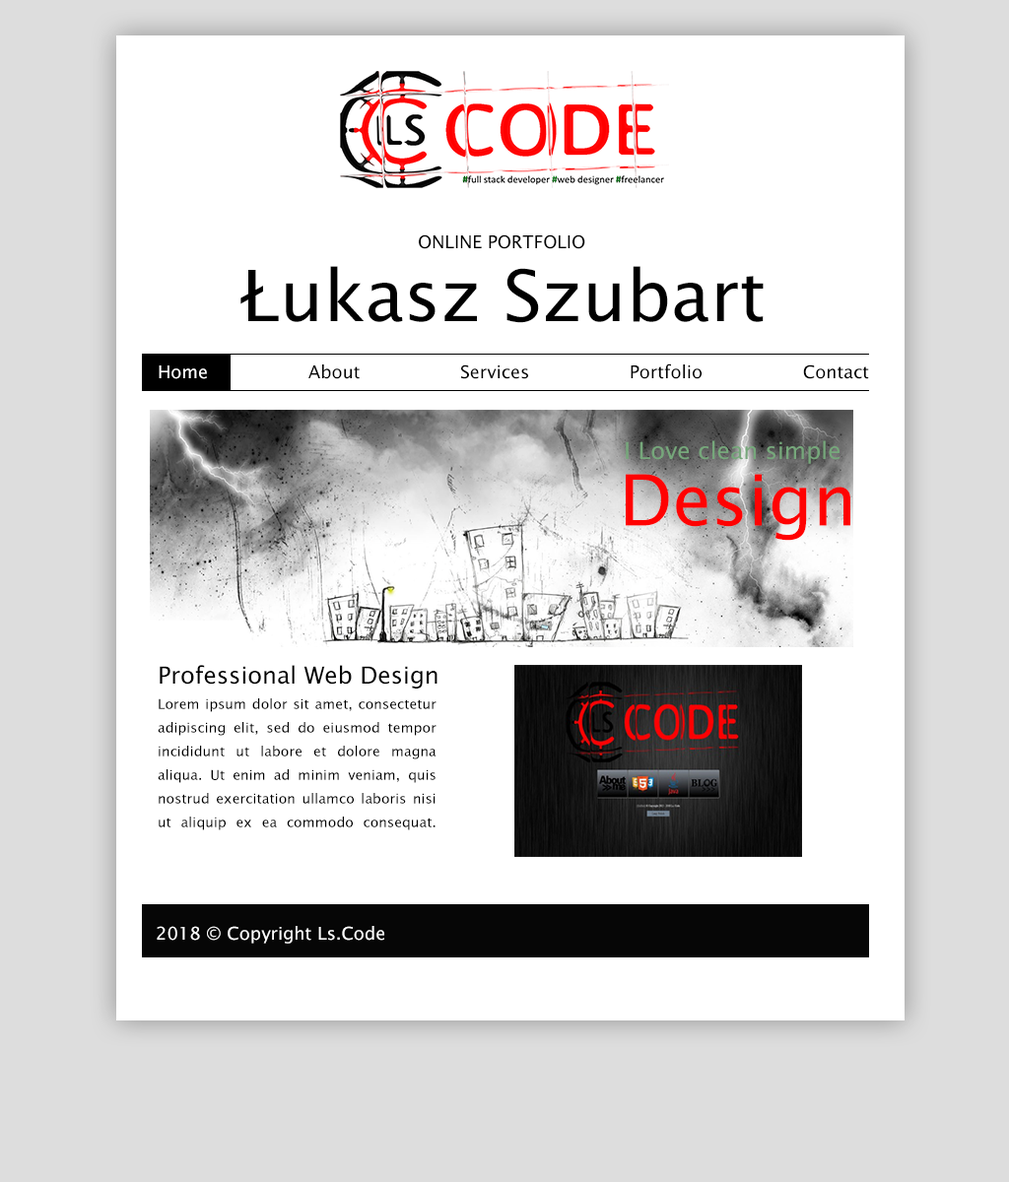
<style>
.page{position:relative;width:1009px;height:1182px;background:#ffffff}
.page>*{position:absolute;margin:0}
.t1{font:17.7px "LucidaSansUnicode";color:#000000}
.t2{font:70.9px "LucidaSansUnicode";color:#000000}
.t3{font:17.7px "LucidaSansUnicode";color:#ffffff}
.t4{font:23.6px "LucidaSansUnicode";color:#76a77b}
.t5{font:70.9px "LucidaSansUnicode";color:#ff0202}
.t6{font:23.6px "LucidaSansUnicode";color:#000000}
.t7{font:13.8px/23.6px "LucidaSansUnicode";color:#000000}
</style>
<div class="page">
<p class="t1" style="left:419px;top:234px;width:166px;height:15px">ONLINE PORTFOLIO</p>
<p class="t2" style="left:240px;top:266px;width:523px;height:57px">Łukasz Szubart</p>
<p class="t1" style="left:159px;top:363px;width:710px;height:16px"><span class="t3">Home </span>About Services Portfolio Contact</p>
<p class="t4" style="left:626px;top:440px;width:213px;height:24px">I Love clean simple</p>
<p class="t5" style="left:626px;top:474px;width:224px;height:67px">Design</p>
<p class="t6" style="left:160px;top:665px;width:277px;height:24px">Professional Web Design</p>
<p class="t7" style="left:158px;top:698px;width:278px;height:132px;text-align:justify">Lorem ipsum dolor sit amet, consectetur adipiscing elit, sed do eiusmod tempor incididunt ut labore et dolore magna aliqua. Ut enim ad minim veniam, quis nostrud exercitation ullamco laboris nisi ut aliquip ex ea commodo consequat.</p>
<p class="t3" style="left:157px;top:926px;width:227px;height:18px">2018 © Copyright Ls.Code</p>
</div>
